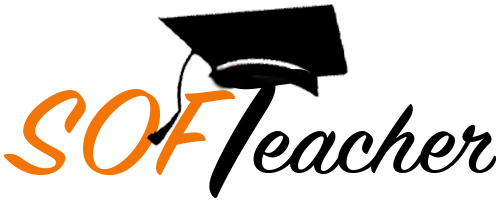
<style>
.page{position:relative;width:500px;height:200px;background:#ffffff}
.page>*{position:absolute;margin:0}
.t1{font:206.7px "SignPainter-HouseScript";letter-spacing:0.012em;color:#000000;scale:1.1 1}
.t2{font:134.3px "SignPainter-HouseScript";letter-spacing:0.012em;color:#f27506;scale:1.1 1}
.t3{font:103.3px "SignPainter-HouseScript";letter-spacing:0.012em;color:#000000;scale:1.1 1}
</style>
<div class="page">
<p class="t1" style="left:209px;top:69px;width:109px;height:129px">T</p>
<p class="t2" style="left:3px;top:89px;width:233px;height:87px">SOF</p>
<p class="t3" style="left:253px;top:104px;width:244px;height:70px">eacher</p>
</div>
